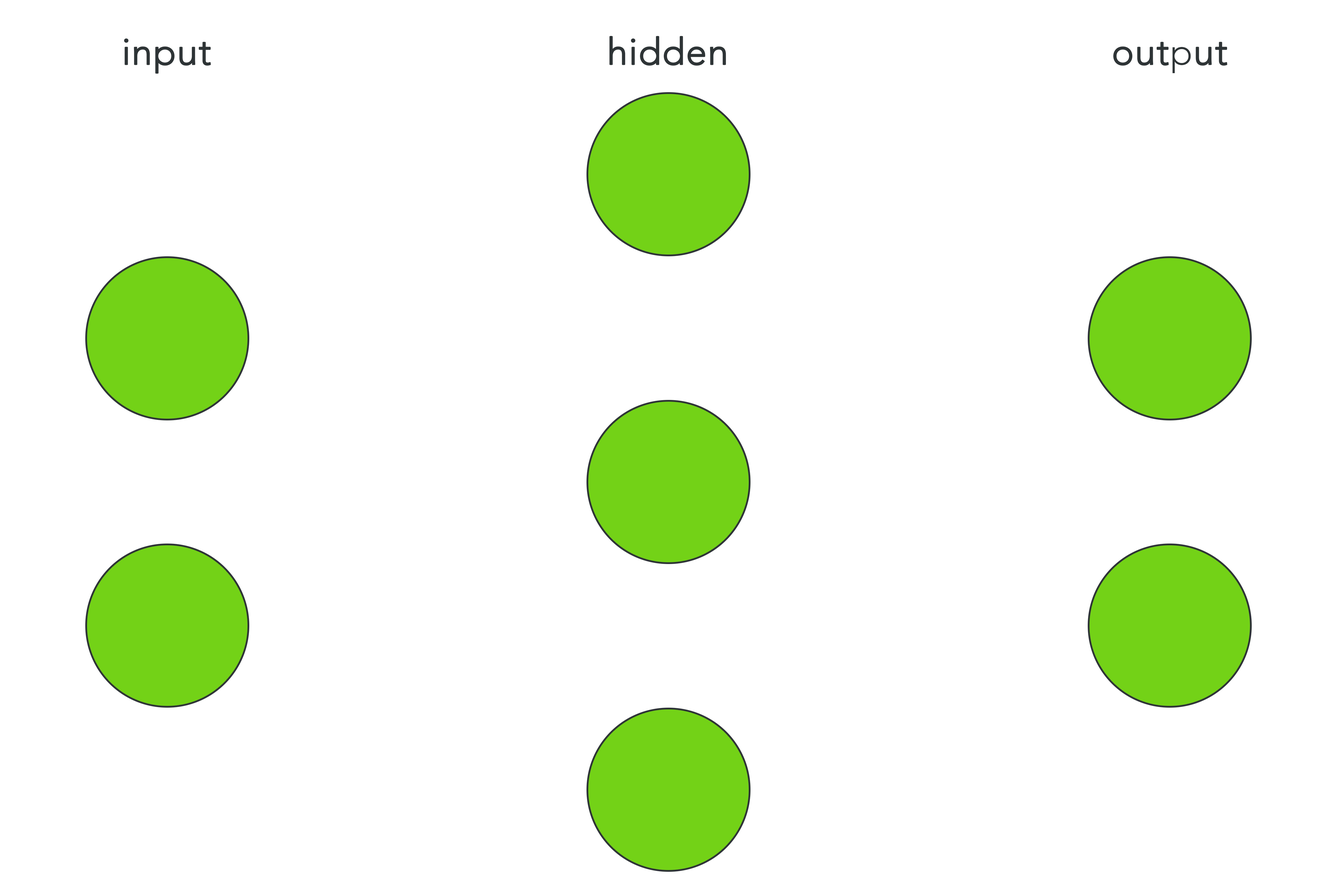
<style>
.page{position:relative;width:1337px;height:892px;background:#ffffff}
.page>*{position:absolute;margin:0}
.t1{font:37.2px "Avenir-Light";color:#2e3436;font-weight:bold}
</style>
<div class="page">
<p class="t1" style="left:124px;top:38px;width:87px;height:36px">input</p>
<p class="t1" style="left:610px;top:36px;width:116px;height:30px">hidden</p>
<p class="t1" style="left:1114px;top:42px;width:114px;height:31px">output</p>
</div>
